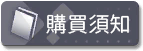
<style>
.page{position:relative;width:143px;height:51px;background:#4e515e}
.page>*{position:absolute;margin:0}
.t1{font:21.3px "GenJyuuGothic-P-Regular";color:#ffffff}
</style>
<div class="page">
<p class="t1" style="left:46px;top:14px;width:83px;height:20px">購買須知</p>
</div>
